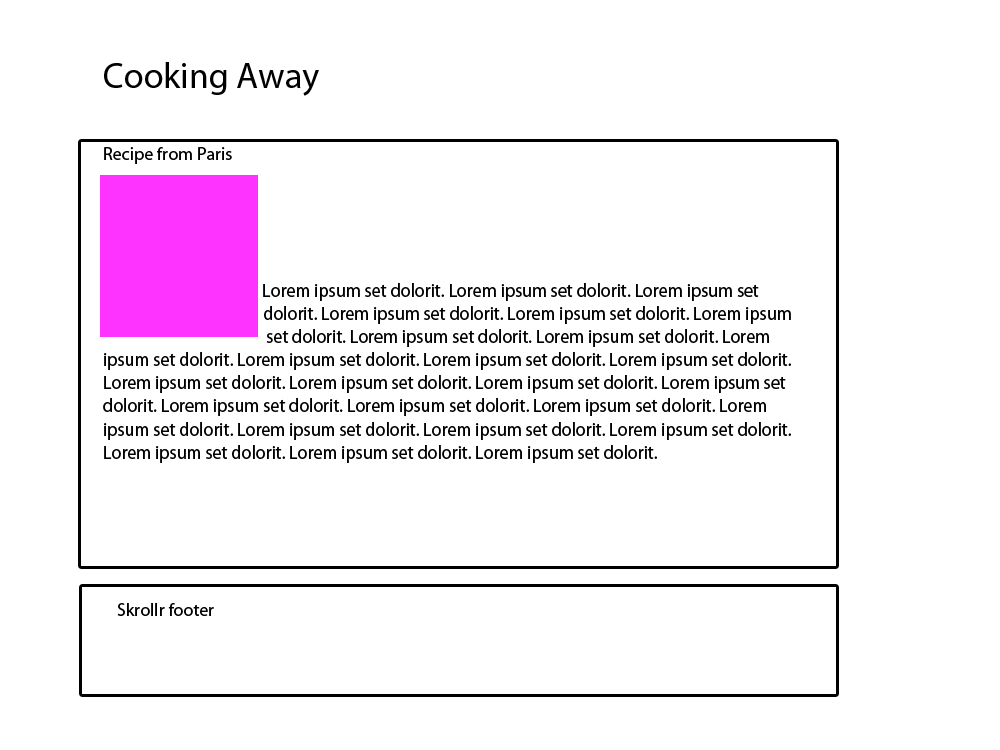
<style>
.page{position:relative;width:1000px;height:750px;background:#ffffff}
.page>*{position:absolute;margin:0}
.t1{font:36px "MyriadPro-Regular";color:#000000}
.t2{font:18px "MyriadPro-Regular";color:#000000}
.t3{font:19.3px "MyriadPro-Regular";color:#000000;scale:0.93 1}
</style>
<div class="page">
<p class="t1" style="left:104px;top:62px;width:215px;height:34px">Cooking Away</p>
<p class="t2" style="left:104px;top:147px;width:128px;height:17px">Recipe from Paris</p>
<p class="t3" style="left:103px;top:283px;width:688px;height:180px">Lorem ipsum set dolorit. Lorem ipsum set dolorit. Lorem ipsum set                                             dolorit. Lorem ipsum set dolorit. Lorem ipsum set dolorit. Lorem ipsum           set dolorit. Lorem ipsum set dolorit. Lorem ipsum set dolorit. Lorem ipsum set dolorit. Lorem ipsum set dolorit. Lorem ipsum set dolorit. Lorem ipsum set dolorit. Lorem ipsum set dolorit. Lorem ipsum set dolorit. Lorem ipsum set dolorit. Lorem ipsum set dolorit. Lorem ipsum set dolorit. Lorem ipsum set dolorit. Lorem ipsum set dolorit. Lorem ipsum set dolorit. Lorem ipsum set dolorit. Lorem ipsum set dolorit. Lorem ipsum set dolorit. Lorem ipsum set dolorit. Lorem ipsum set dolorit. Lorem ipsum set dolorit.</p>
<p class="t2" style="left:117px;top:603px;width:97px;height:13px">Skrollr footer</p>
</div>
